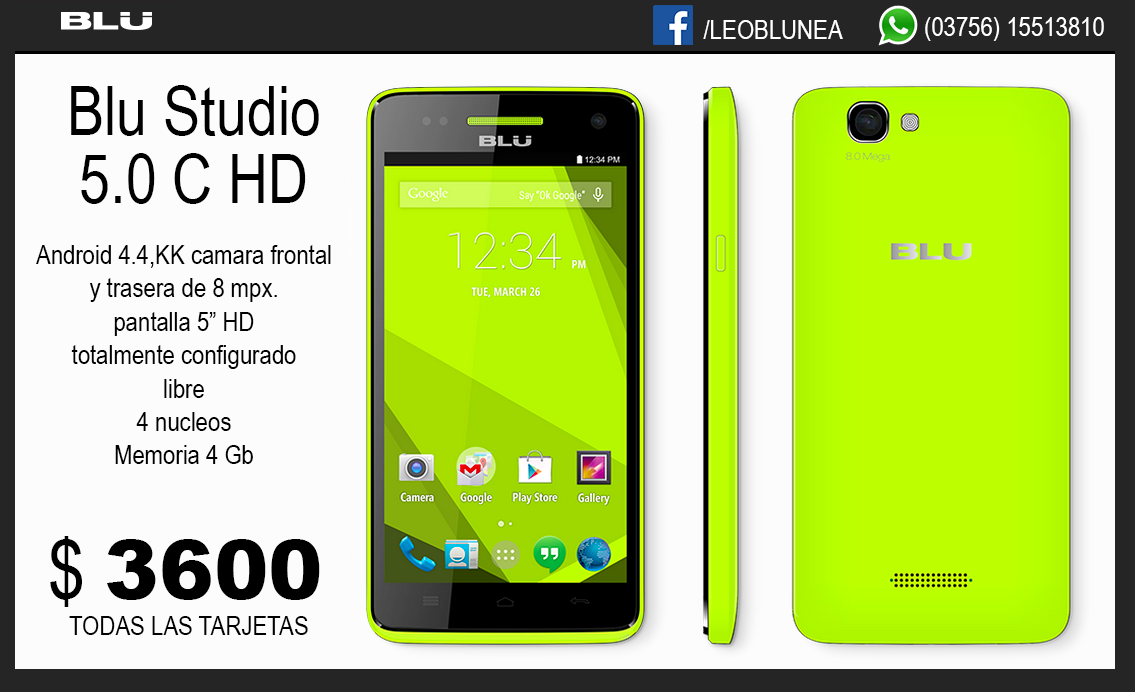
<style>
.page{position:relative;width:1135px;height:692px;background:#fcfcfc}
.page>*{position:absolute;margin:0}
.t1{font:27px "ArialNarrow";color:#ffffff}
.t2{font:27px "ArialNarrow";color:#ffffff;text-transform:uppercase}
.t3{font:67.8px/67.8px "ArialNarrow";color:#000000}
.t4{font:27px/33.4px "ArialNarrow";color:#000000}
.t5{font:82px "Arial-Black";color:#000000}
.t6{font:82px "ArialNarrow";color:#000000}
.t7{font:27px "ArialNarrow";color:#000000;text-transform:uppercase}
</style>
<div class="page">
<p class="t1" style="left:925px;top:17px;width:179px;height:24px">(03756) 15513810</p>
<p class="t2" style="left:703px;top:20px;width:140px;height:19px">/leoblunea</p>
<p class="t3" style="left:71px;top:85px;width:248px;height:119px;text-align:center">Blu Studio<br>5.0 C HD</p>
<p class="t4" style="left:36px;top:245px;width:295px;height:219px;text-align:center">Android 4.4,KK camara frontal<br>y trasera de 8 mpx.<br>pantalla 5” HD<br>totalmente configurado<br>libre<br>4 nucleos<br>Memoria 4 Gb</p>
<p class="t5" style="left:50px;top:536px;width:270px;height:71px"><span class="t6">$ </span>3600</p>
<p class="t7" style="left:69px;top:616px;width:239px;height:19px">TODAS LAS TARJETAS</p>
</div>
